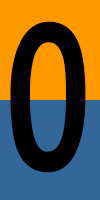
<style>
.page{position:relative;width:100px;height:200px;background:#336699}
.page>*{position:absolute;margin:0}
.t1{font:197.6px "TrebuchetMS";color:#010000;font-weight:bold;scale:0.77 1}
</style>
<div class="page">
<p class="t1" style="left:10px;top:21px;width:76px;height:152px">0</p>
</div>
